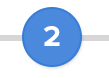
<style>
.page{position:relative;width:109px;height:78px;background:#ffffff}
.page>*{position:absolute;margin:0}
.t1{font:30px "ProximaNova-Bold";letter-spacing:0.08em;color:#ffffff}
</style>
<div class="page">
<p class="t1" style="left:44px;top:26px;width:16px;height:20px">2</p>
</div>
